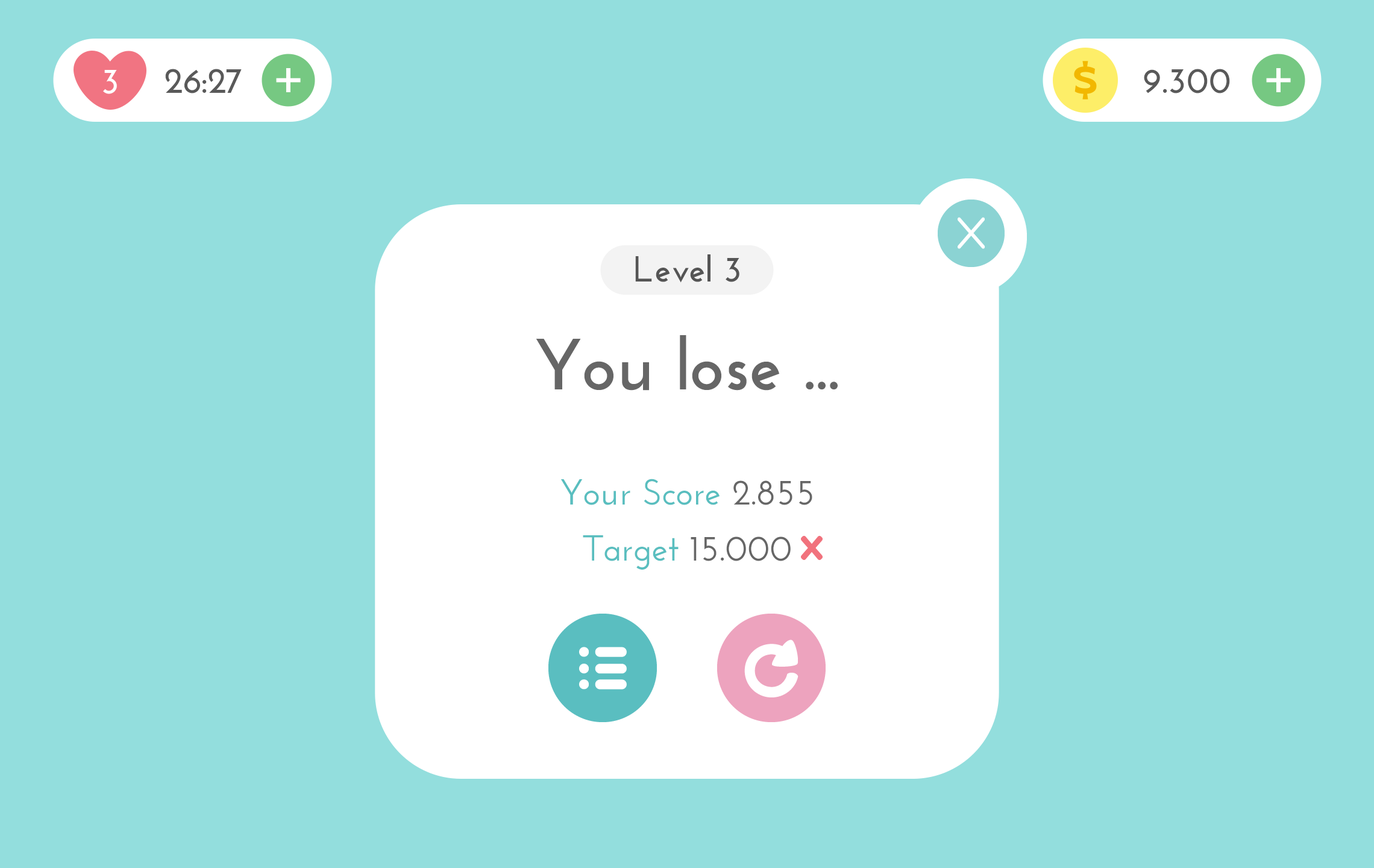
<style>
.page{position:relative;width:1374px;height:868px;background:#93dedd}
.page>*{position:absolute;margin:0}
.t1{font:36.2px "JosefinSans-Bold";color:#ffffff}
.t2{font:36.2px "JosefinSans-Bold";color:#595959}
.t3{font:36.2px "JosefinSans-Bold";color:#555555}
.t4{font:72.3px "JosefinSans-Bold";color:#666666}
.t5{font:36.2px "JosefinSans-SemiBold";color:#59bebf}
.t6{font:36.2px "JosefinSans-SemiBold";color:#666666}
</style>
<div class="page">
<p class="t1" style="left:103px;top:70px;width:14px;height:24px">3</p>
<p class="t2" style="left:165px;top:69px;width:77px;height:24px">26:27</p>
<p class="t2" style="left:1144px;top:69px;width:86px;height:24px">9.300</p>
<p class="t3" style="left:635px;top:254px;width:104px;height:29px">Level 3</p>
<p class="t4" style="left:536px;top:335px;width:302px;height:56px">You lose ...</p>
<p class="t5" style="left:561px;top:479px;width:251px;height:26px">Your Score<span class="t6"> 2.855</span></p>
<p class="t5" style="left:583px;top:535px;width:208px;height:35px">Target<span class="t6"> 15.000</span></p>
</div>
